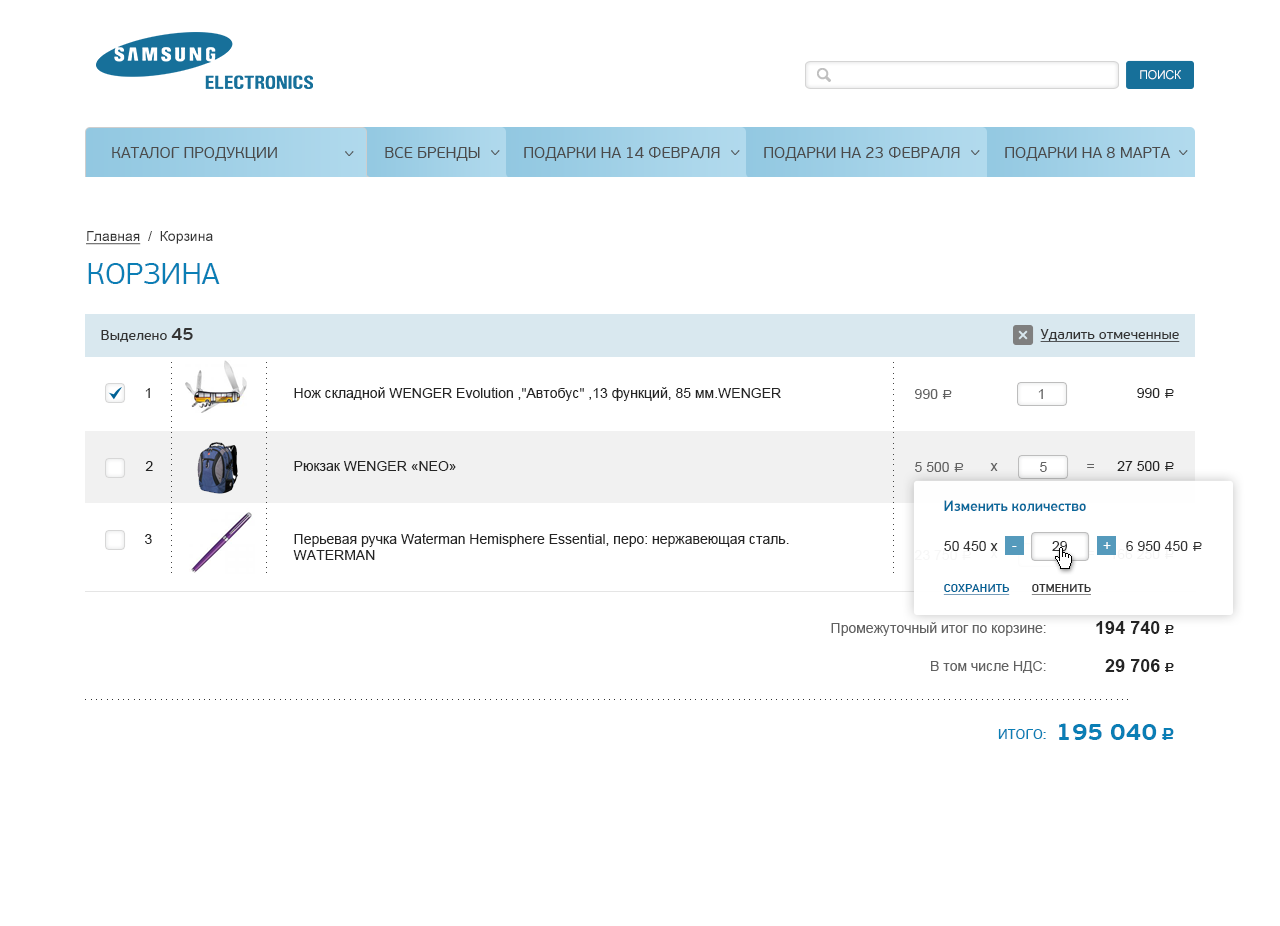
<style>
.page{position:relative;width:1280px;height:926px;background:#ffffff}
.page>*{position:absolute;margin:0}
.t1{font:12px "ArialMT";letter-spacing:-0.01em;color:#ffffff;text-transform:uppercase}
.t2{font:16px "PFBeauSansPro-Light";color:#4b4b4b;text-transform:uppercase}
.t3{font:14px "ArialMT";color:#333333}
.t4{font:14px "ArialMT";color:#333333;text-decoration:underline}
.t5{font:30px "PFBeauSansPro-Light";color:#0a7eb5;text-transform:uppercase}
.t6{font:14px "PFBeauSansPro-Bbook";color:#333333}
.t7{font:18px "PFBeauSansPro-SemiBold";color:#333333}
.t8{font:14px "PFBeauSansPro-Bbook";color:#333333;text-decoration:underline}
.t9{font:12px "ArialMT";letter-spacing:0.2em;color:#454545}
.t10{font:14px "ArialMT";color:#252525}
.t11{font:14px "ArialMT";color:#626262}
.t12{font:14px "ALSRubl";color:#626262}
.t13{font:14px "ALSRubl";color:#252525}
.t14{font:15px "PFDinTextPro-Medium";color:#006599}
.t15{font:14px/16px "ArialMT";color:#252525}
.t16{font:14px "ArialMT";color:#ffffff}
.t17{font:14px "ALSRubl";color:#333333}
.t18{font:12px "PFDinTextPro-Medium";color:#006296;text-transform:uppercase;text-decoration:underline}
.t19{font:12px "PFDinTextPro-Medium";color:#333333;text-transform:uppercase;text-decoration:underline}
.t20{font:14px/38px "ArialMT";color:#626262}
.t21{font:18px/38px "Arial-BoldMT";color:#252525}
.t22{font:14px/18px "ALSRubl";color:#252525}
.t23{font:12px "ArialMT";letter-spacing:0.2em;color:#313131}
.t24{font:24px "PFBeauSansPro-Bold";color:#0a7eb5;text-transform:uppercase}
.t25{font:18px "ALSRubl";color:#0a7eb5}
.t26{font:14px "PFBeauSansPro-Regular";color:#0a7eb5;text-transform:uppercase}
</style>
<div class="page">
<p class="t1" style="left:1140px;top:70px;width:41px;height:10px">поиск</p>
<p class="t2" style="left:112px;top:147px;width:165px;height:14px">каталог продукции</p>
<p class="t2" style="left:385px;top:147px;width:95px;height:14px">все бренды</p>
<p class="t2" style="left:524px;top:147px;width:196px;height:14px">подарки на 14 февраля</p>
<p class="t2" style="left:764px;top:147px;width:196px;height:14px">подарки на 23 февраля</p>
<p class="t2" style="left:1005px;top:147px;width:166px;height:14px">подарки на 8 марта</p>
<p class="t3" style="left:86px;top:231px;width:127px;height:14px"><span class="t4">Главная</span>  /  Корзина</p>
<p class="t5" style="left:88px;top:263px;width:132px;height:21px">Корзина</p>
<p class="t6" style="left:101px;top:328px;width:92px;height:14px">Выделено <span class="t7">45</span></p>
<p class="t8" style="left:1040px;top:329px;width:140px;height:13px">Удалить отмеченные</p>
<p class="t9" style="left:171px;top:362px;width:1px;height:211px;rotate:90deg">........................................</p>
<p class="t9" style="left:266px;top:362px;width:1px;height:211px;rotate:90deg">........................................</p>
<p class="t9" style="left:893px;top:362px;width:1px;height:211px;rotate:90deg">........................................</p>
<p class="t10" style="left:145px;top:388px;width:5px;height:10px">1</p>
<p class="t10" style="left:294px;top:387px;width:487px;height:14px">Нож складной WENGER Evolution ,"Автобус" ,13 функций, 85 мм.WENGER</p>
<p class="t11" style="left:915px;top:389px;width:37px;height:10px">990 <span class="t12">a</span></p>
<p class="t11" style="left:1038px;top:389px;width:5px;height:10px">1</p>
<p class="t10" style="left:1137px;top:388px;width:37px;height:10px">990 <span class="t13">a</span></p>
<p class="t10" style="left:145px;top:461px;width:8px;height:10px">2</p>
<p class="t10" style="left:294px;top:461px;width:162px;height:10px">Рюкзак WENGER «NEO»</p>
<p class="t11" style="left:915px;top:462px;width:49px;height:10px">5 500 <span class="t12">a</span></p>
<p class="t11" style="left:1040px;top:462px;width:7px;height:10px">5</p>
<p class="t10" style="left:1117px;top:461px;width:57px;height:10px">27 500 <span class="t13">a</span></p>
<p class="t11" style="left:990px;top:463px;width:8px;height:8px">х</p>
<p class="t11" style="left:1087px;top:464px;width:7px;height:4px">=</p>
<p class="t14" style="left:944px;top:500px;width:142px;height:12px">Изменить количество</p>
<p class="t10" style="left:145px;top:534px;width:7px;height:10px">3</p>
<p class="t15" style="left:293px;top:533px;width:496px;height:27px">Перьевая ручка Waterman Hemisphere Essential, перо: нержавеющая сталь.<br>WATERMAN</p>
<p class="t3" style="left:944px;top:541px;width:54px;height:10px">50 450 х</p>
<p class="t3" style="left:1052px;top:541px;width:15px;height:10px">29</p>
<p class="t16" style="left:1103px;top:542px;width:8px;height:7px">+</p>
<p class="t3" style="left:1126px;top:541px;width:76px;height:10px">6 950 450 <span class="t17">a</span></p>
<p class="t16" style="left:1012px;top:546px;width:5px;height:1px">-</p>
<p class="t18" style="left:943px;top:584px;width:67px;height:11px">Сохранить</p>
<p class="t19" style="left:1031px;top:584px;width:60px;height:11px">Отменить</p>
<p class="t20" style="left:831px;top:622px;width:215px;height:51px;text-align:right">Промежуточный итог по корзине:<br>В том числе НДС:</p>
<p class="t21" style="left:1096px;top:621px;width:78px;height:51px;text-align:right">194 740 <span class="t22">c<br></span>29 706 <span class="t22">c</span></p>
<p class="t23" style="left:85px;top:699px;width:1043px;height:1px">..................................................................................................................................................................................................</p>
<p class="t24" style="left:1059px;top:723px;width:115px;height:17px">195 040 <span class="t25">c</span></p>
<p class="t26" style="left:998px;top:729px;width:48px;height:10px">ИТОГО:</p>
</div>
